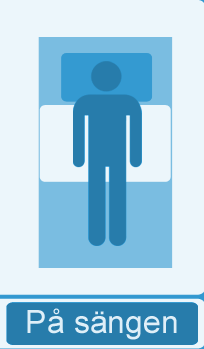
<style>
.page{position:relative;width:204px;height:349px;background:#ecf6fb}
.page>*{position:absolute;margin:0}
.t1{font:32px "ArialMT";color:#dfeff8}
</style>
<div class="page">
<p class="t1" style="left:27px;top:308px;width:150px;height:32px">På sängen</p>
</div>
